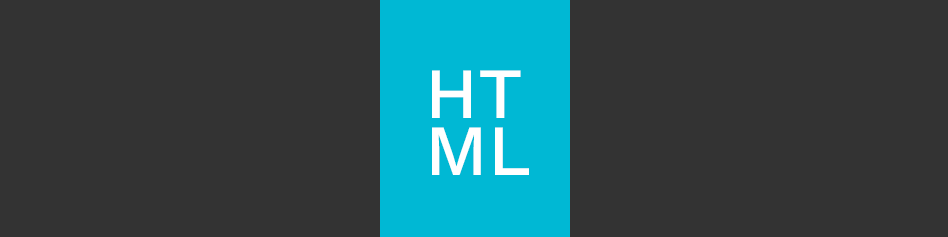
<style>
.page{position:relative;width:948px;height:237px;background:#333333}
.page>*{position:absolute;margin:0}
.t1{font:72px "WorkSans-Medium";color:#ffffff}
</style>
<div class="page">
<p class="t1" style="left:432px;top:70px;width:89px;height:48px">HT</p>
<p class="t1" style="left:432px;top:127px;width:97px;height:48px">ML</p>
</div>
